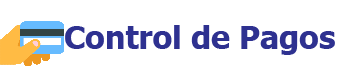
<style>
.page{position:relative;width:340px;height:71px;background:#ffffff}
.page>*{position:absolute;margin:0}
.t1{font:32px "Tahoma-Bold";color:#2e3190}
</style>
<div class="page">
<p class="t1" style="left:65px;top:25px;width:270px;height:30px">Control de Pagos</p>
</div>
